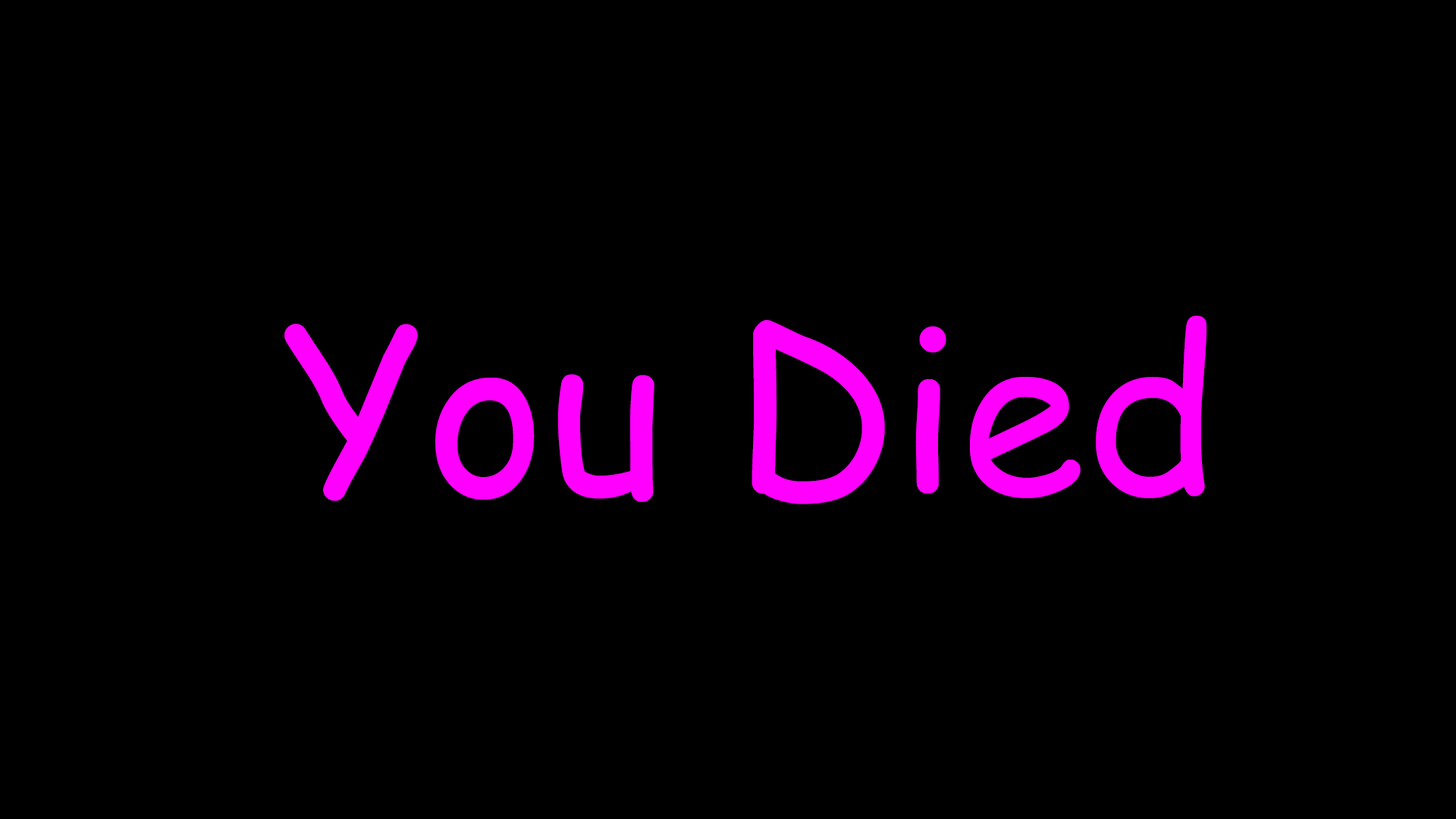
<style>
.page{position:relative;width:1456px;height:819px;background:#000000}
.page>*{position:absolute;margin:0}
.t1{font:227.5px "ComicSansMS";color:#ff00ff}
</style>
<div class="page">
<p class="t1" style="left:284px;top:315px;width:922px;height:189px">You Died</p>
</div>
